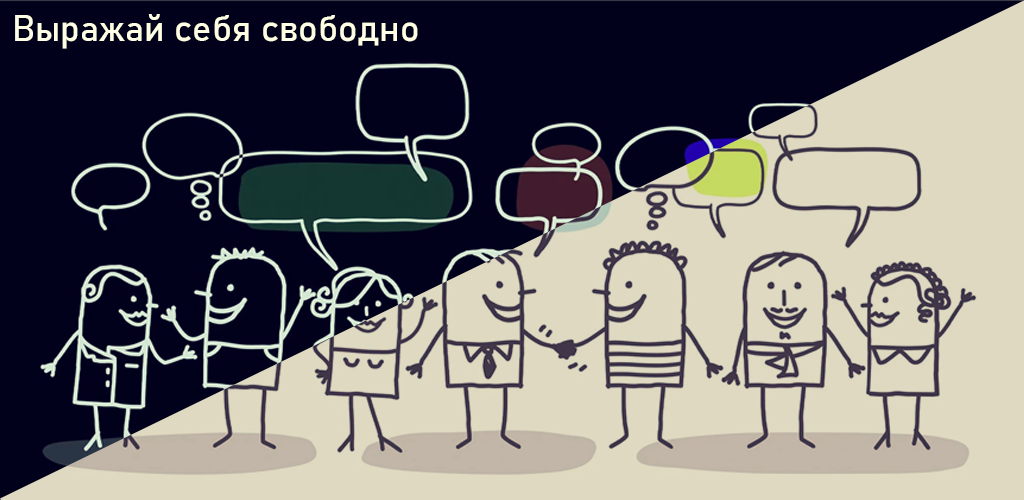
<style>
.page{position:relative;width:1024px;height:500px;background:#01011b}
.page>*{position:absolute;margin:0}
.t1{font:36px "Bahnschrift";color:#ffffe5}
</style>
<div class="page">
<p class="t1" style="left:15px;top:14px;width:403px;height:35px">Выражай себя свободно</p>
</div>
